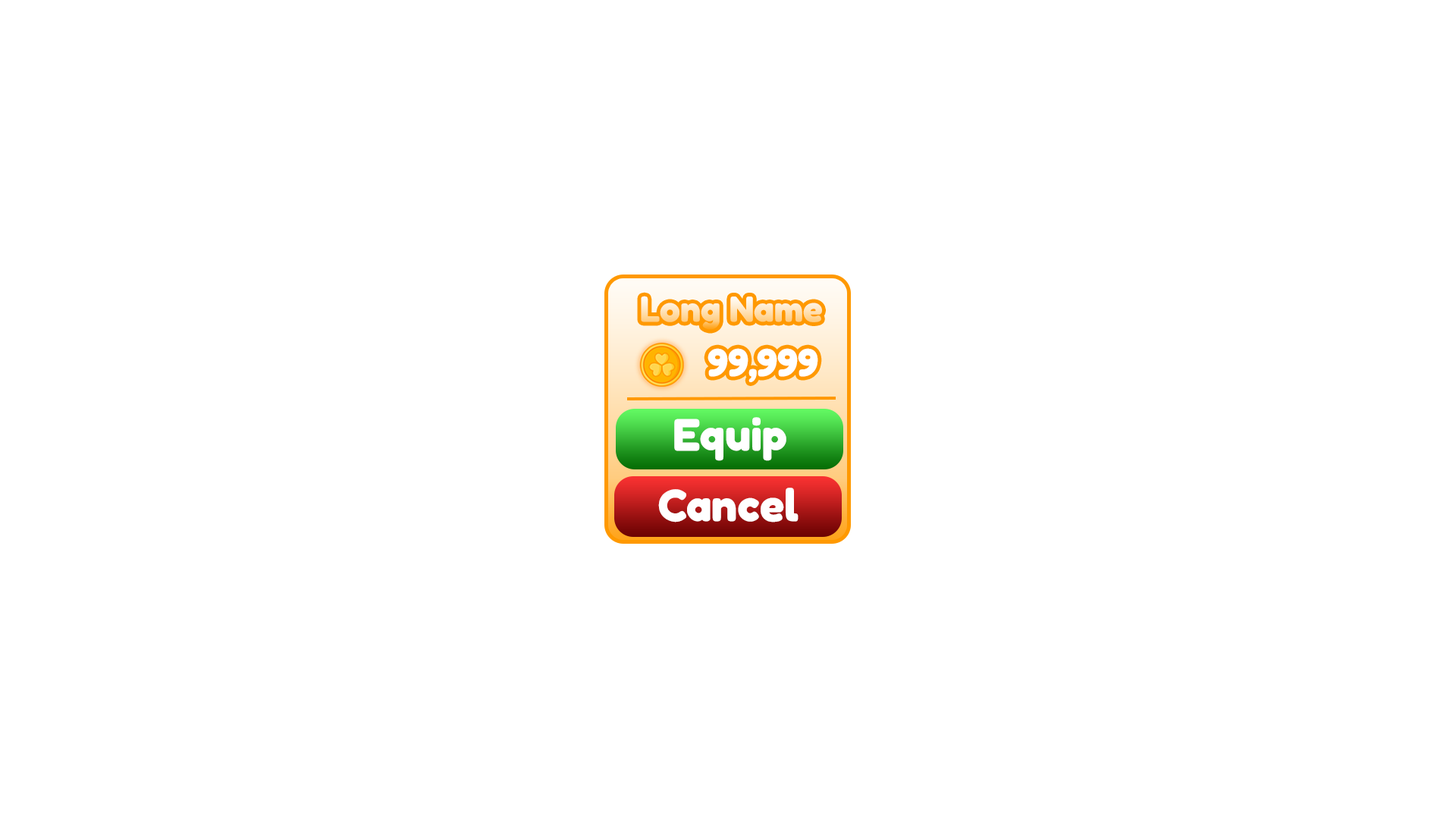
<style>
.page{position:relative;width:1456px;height:819px;background:#ffffff}
.page>*{position:absolute;margin:0}
.t1{font:36.4px "Fredoka-Bold"}
.t2{font:39.1px "Fredoka-Bold";color:#ffffff}
.t3{font:45.5px "Fredoka-Bold";color:#ffffff}
</style>
<div class="page">
<p class="t1" style="left:641px;top:296px;width:181px;height:34px">Long Name</p>
<p class="t2" style="left:708px;top:348px;width:110px;height:34px">99,999</p>
<p class="t3" style="left:674px;top:417px;width:112px;height:44px">Equip</p>
<p class="t3" style="left:658px;top:488px;width:141px;height:34px">Cancel</p>
</div>
